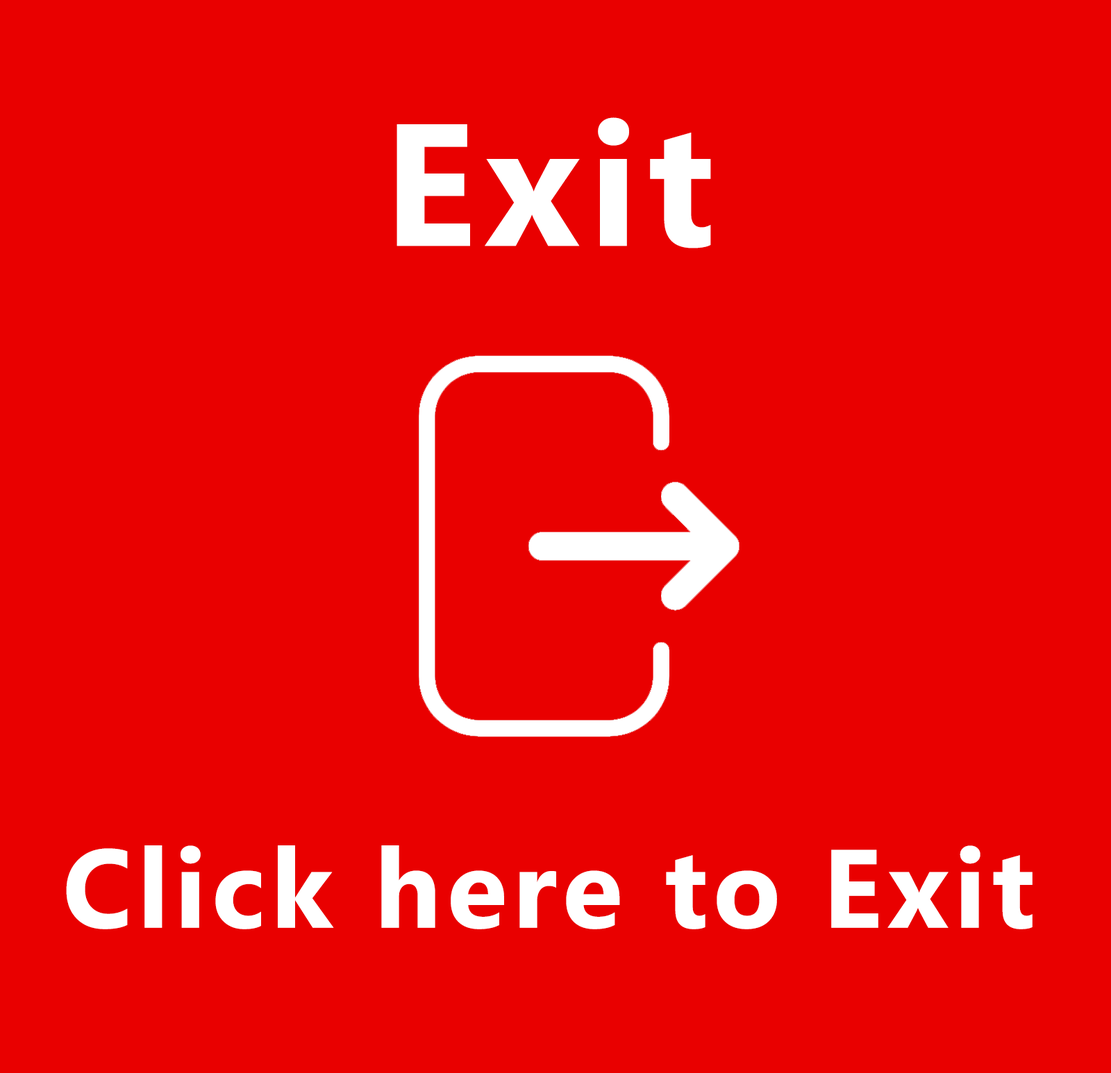
<style>
.page{position:relative;width:1111px;height:1073px;background:#e90000}
.page>*{position:absolute;margin:0}
.t1{font:173.6px "Gadugi-Bold";letter-spacing:0.05em;color:#ffffff}
.t2{font:111.1px "Gadugi-Bold";letter-spacing:0.05em;color:#ffffff}
</style>
<div class="page">
<p class="t1" style="left:396px;top:117px;width:315px;height:132px">Exit</p>
<p class="t2" style="left:66px;top:846px;width:966px;height:84px">Click here to Exit</p>
</div>
